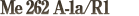
<style>
.page{position:relative;width:139px;height:16px;background:#ffffff}
.page>*{position:absolute;margin:0}
.t1{font:18px "RyuminPro-ExBold";letter-spacing:-0.08em;color:#4a3f32;font-weight:bold;scale:0.9 1}
</style>
<div class="page">
<p class="t1" style="left:0px;top:0px;width:110px;height:15px">Me 262 A-1a/R1</p>
</div>
